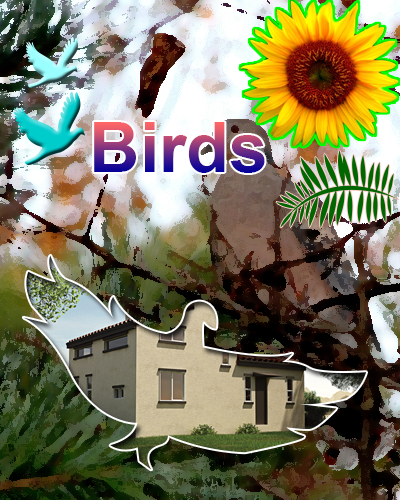
<style>
.page{position:relative;width:400px;height:500px}
.page>*{position:absolute;margin:0}
.t1{font:70px "Arial-BoldMT"}
</style>
<div class="page">
<p class="t1" style="left:94px;top:122px;width:171px;height:51px">Birds</p>
</div>
